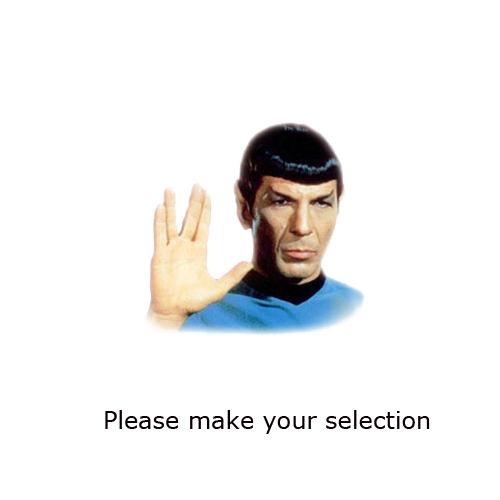
<style>
.page{position:relative;width:500px;height:500px;background:#ffffff}
.page>*{position:absolute;margin:0}
.t1{font:24px "Verdana";color:#0c0004}
</style>
<div class="page">
<p class="t1" style="left:105px;top:410px;width:325px;height:24px">Please make your selection</p>
</div>
